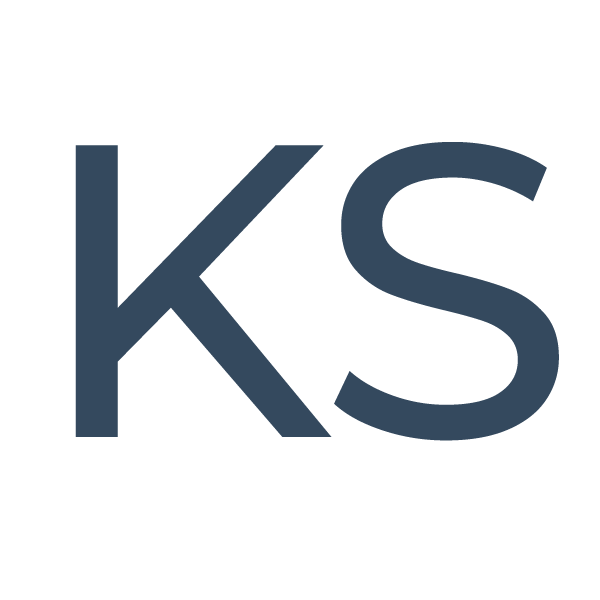
<style>
.page{position:relative;width:600px;height:600px;background:#ffffff}
.page>*{position:absolute;margin:0}
.t1{font:416.7px "Montserrat-Medium";letter-spacing:-0.02em;color:#34495e;text-transform:uppercase}
</style>
<div class="page">
<p class="t1" style="left:75px;top:142px;width:484px;height:299px">KS</p>
</div>
